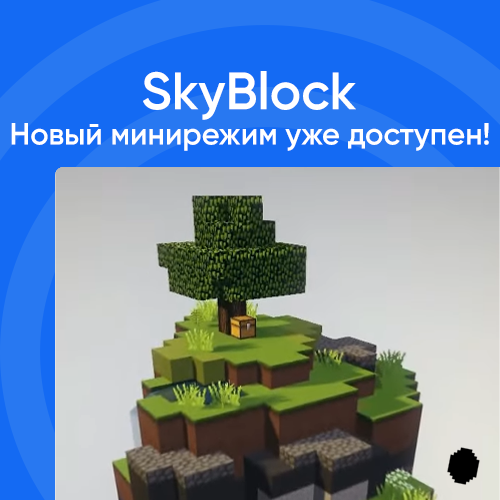
<style>
.page{position:relative;width:500px;height:500px}
.page>*{position:absolute;margin:0}
.t1{font:52.5px "Gilroy-SemiBold";color:#ffffff}
.t2{font:30.7px "Gilroy-SemiBold";color:#ffffff}
</style>
<div class="page">
<p class="t1" style="left:143px;top:71px;width:213px;height:49px">SkyBlock</p>
<p class="t2" style="left:11px;top:123px;width:478px;height:28px">Новый минирежим уже доступен!</p>
</div>
